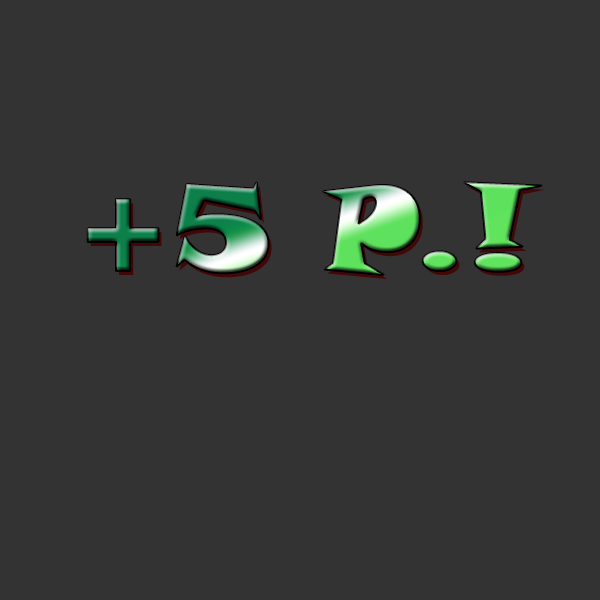
<style>
.page{position:relative;width:600px;height:600px;background:#333333}
.page>*{position:absolute;margin:0}
.t1{font:120px "SnapITC-Regular"}
</style>
<div class="page">
<p class="t1" style="left:87px;top:182px;width:455px;height:93px">+5 P.!</p>
</div>
